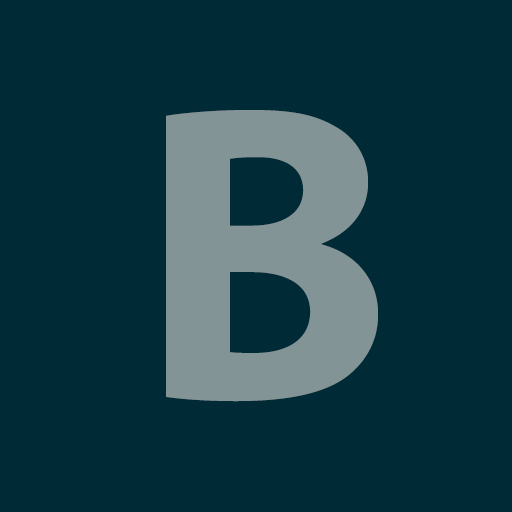
<style>
.page{position:relative;width:512px;height:512px;background:#002b36}
.page>*{position:absolute;margin:0}
.t1{font:424px "MyriadPro-Bold";color:#839496}
</style>
<div class="page">
<p class="t1" style="left:166px;top:110px;width:212px;height:292px">B</p>
</div>
